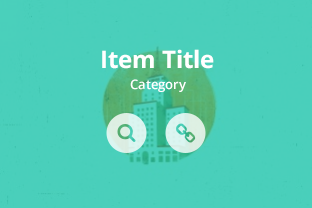
<style>
.page{position:relative;width:312px;height:208px;background:#4acfbb}
.page>*{position:absolute;margin:0}
.t1{font:24px "OpenSans-Bold";color:#ffffff}
.t2{font:13px "OpenSans-Semibold";color:#ffffff}
</style>
<div class="page">
<p class="t1" style="left:102px;top:49px;width:112px;height:20px">Item Title</p>
<p class="t2" style="left:130px;top:79px;width:56px;height:13px">Category</p>
</div>
